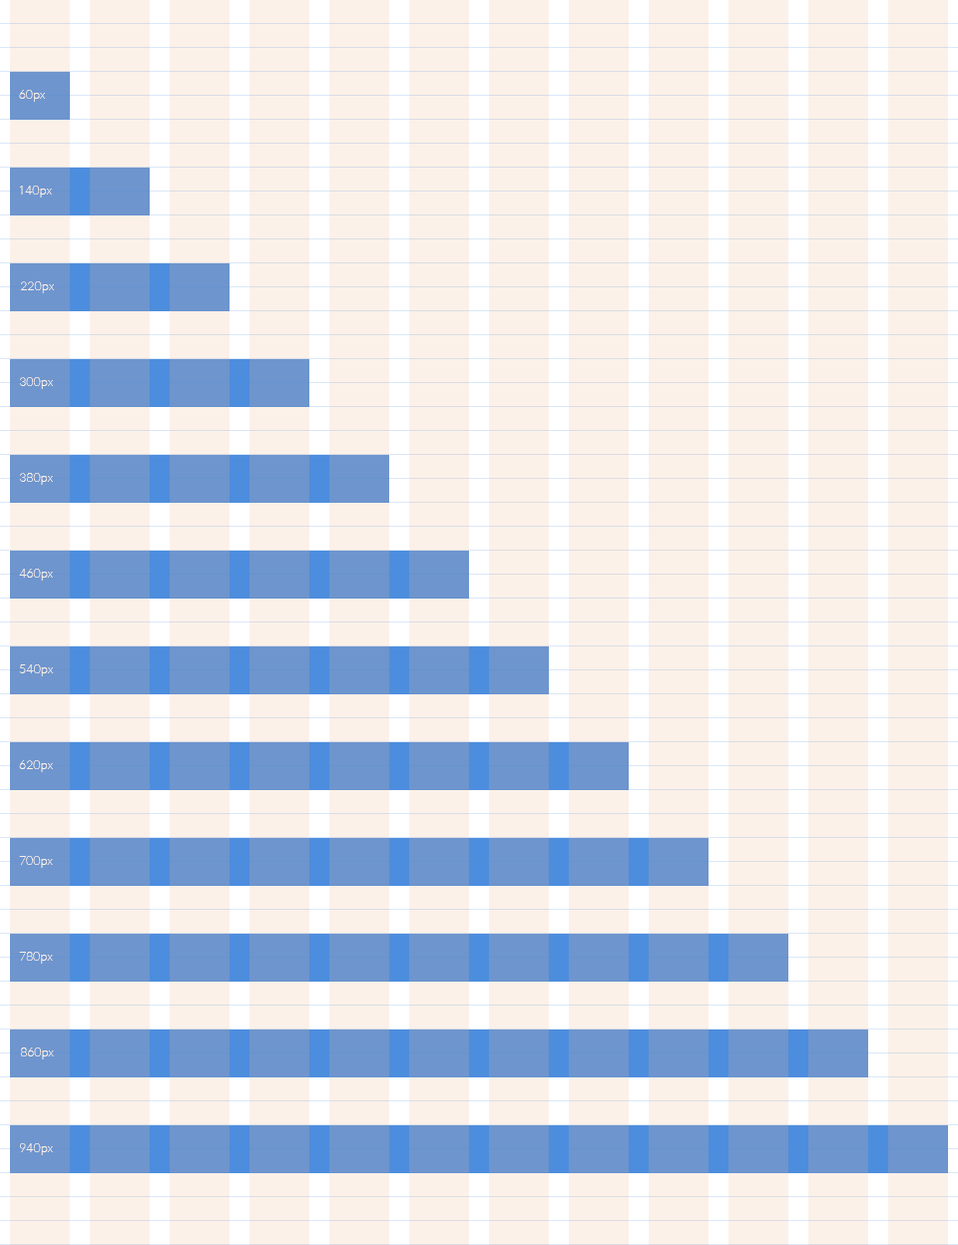
<style>
.page{position:relative;width:958px;height:1245px;background:#fcf1e8}
.page>*{position:absolute;margin:0}
.t1{font:12px "SpoqaHanSans-Thin";color:#ffffff}
</style>
<div class="page">
<p class="t1" style="left:19px;top:90px;width:27px;height:12px">60px</p>
<p class="t1" style="left:19px;top:186px;width:33px;height:12px">140px</p>
<p class="t1" style="left:20px;top:281px;width:35px;height:12px">220px</p>
<p class="t1" style="left:19px;top:377px;width:35px;height:12px">300px</p>
<p class="t1" style="left:19px;top:473px;width:34px;height:12px">380px</p>
<p class="t1" style="left:19px;top:569px;width:34px;height:12px">460px</p>
<p class="t1" style="left:19px;top:664px;width:35px;height:12px">540px</p>
<p class="t1" style="left:19px;top:760px;width:34px;height:12px">620px</p>
<p class="t1" style="left:19px;top:856px;width:34px;height:12px">700px</p>
<p class="t1" style="left:19px;top:952px;width:34px;height:12px">780px</p>
<p class="t1" style="left:21px;top:1048px;width:33px;height:11px">860px</p>
<p class="t1" style="left:19px;top:1143px;width:34px;height:12px">940px</p>
</div>
